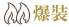
<style>
.page{position:relative;width:69px;height:27px;background:#ffffff}
.page>*{position:absolute;margin:0}
.t1{font:18px "RyuminPro-Heavy";color:#ae9442}
</style>
<div class="page">
<p class="t1" style="left:33px;top:4px;width:35px;height:18px">爆裝</p>
</div>
